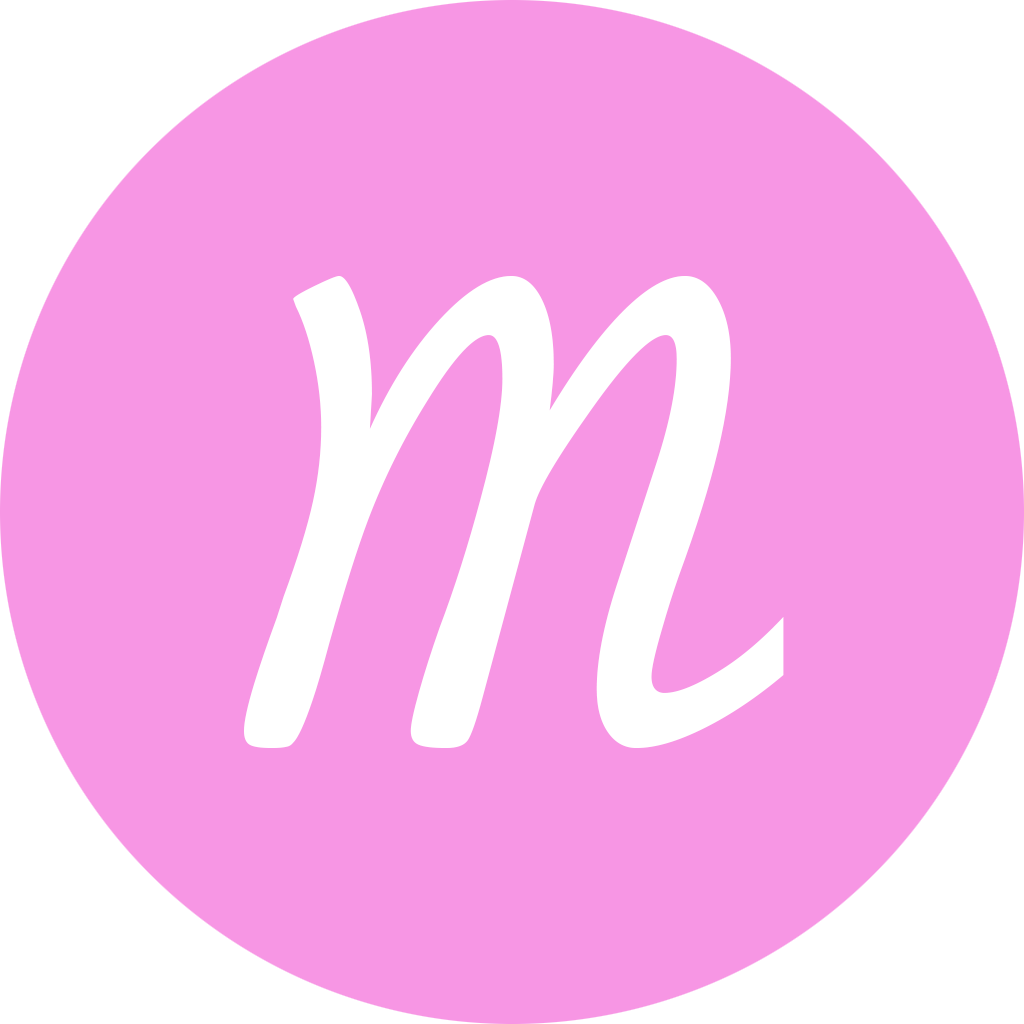
<style>
.page{position:relative;width:1024px;height:1024px;background:#f796e4}
.page>*{position:absolute;margin:0}
.t1{font:700px "JCfg";color:#ffffff}
</style>
<div class="page">
<p class="t1" style="left:244px;top:276px;width:540px;height:472px">M</p>
</div>
